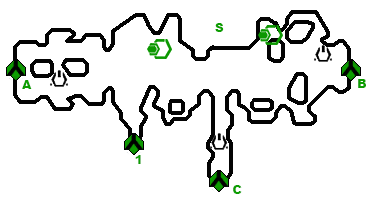
<style>
.page{position:relative;width:376px;height:200px;background:#ffffff}
.page>*{position:absolute;margin:0}
.t1{font:12px "Arial-Black";color:#0d9e01}
</style>
<div class="page">
<p class="t1" style="left:215px;top:23px;width:9px;height:9px">S</p>
<p class="t1" style="left:22px;top:80px;width:10px;height:9px">A</p>
<p class="t1" style="left:358px;top:79px;width:8px;height:9px">B</p>
<p class="t1" style="left:135px;top:155px;width:6px;height:9px">1</p>
<p class="t1" style="left:233px;top:185px;width:9px;height:9px">C</p>
</div>
